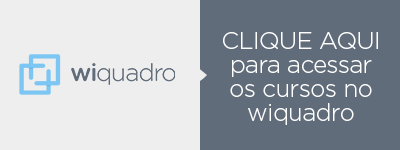
<style>
.page{position:relative;width:400px;height:150px;background:#eeeeee}
.page>*{position:absolute;margin:0}
.t1{font:24px/24px "Gotham-Light";letter-spacing:-0.02em;color:#ffffff}
</style>
<div class="page">
<p class="t1" style="left:223px;top:32px;width:155px;height:93px;text-align:center">CLIQUE AQUI<br>para acessar <br>os cursos no wiquadro</p>
</div>
